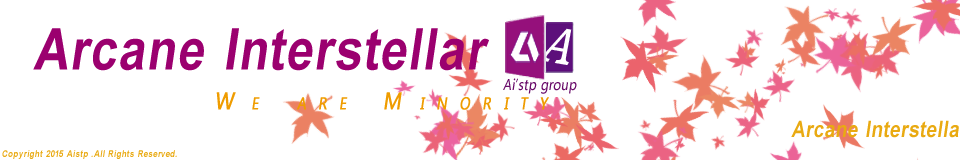
<style>
.page{position:relative;width:960px;height:160px;background:#ffffff}
.page>*{position:absolute;margin:0}
.t1{font:57.6px "Arial-BoldMT";letter-spacing:0.1em;color:#9b006f;font-style:italic;scale:0.83 1}
.t2{font:22.4px "MicrosoftYaHei";letter-spacing:1em;color:#ef9c00;font-variant:small-caps;font-weight:bold;font-style:italic;scale:0.83 1}
.t3{font:9.6px "Arial-BoldMT";letter-spacing:0.1em;color:#e9aa12;font-style:italic;scale:0.83 1}
</style>
<div class="page">
<p class="t1" style="left:33px;top:28px;width:456px;height:43px">Arcane Interstellar</p>
<p class="t2" style="left:216px;top:92px;width:333px;height:18px">We are Minority</p>
<p class="t3" style="left:2px;top:150px;width:175px;height:9px">Copyright 2015 Aistp .All Rights Reserved.</p>
</div>
